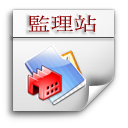
<style>
.page{position:relative;width:128px;height:128px;background:#ffffff}
.page>*{position:absolute;margin:0}
.t1{font:18px "PMingLiU";letter-spacing:0.1em;color:#8f0000;scale:1.23 1}
</style>
<div class="page">
<p class="t1" style="left:28px;top:15px;width:68px;height:17px">監理站</p>
</div>
